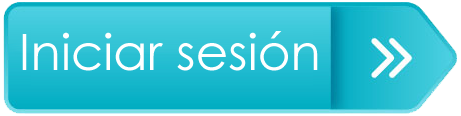
<style>
.page{position:relative;width:461px;height:116px}
.page>*{position:absolute;margin:0}
.t1{font:50px "CenturyGothic";color:#ffffff}
</style>
<div class="page">
<p class="t1" style="left:22px;top:31px;width:296px;height:40px">Iniciar sesión</p>
</div>
